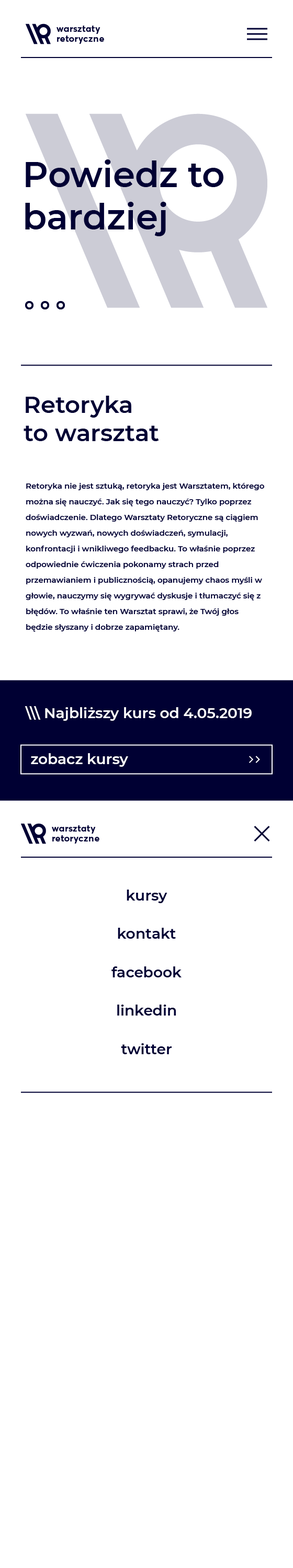
<style>
.page{position:relative;width:293px;height:1568px;background:#ffffff}
.page>*{position:absolute;margin:0}
.t1{font:9.4px/10.2px "Averta-Bold";letter-spacing:0.015em;color:#000033}
.t2{font:35.3px/42.3px "Montserrat-SemiBold";color:#000033}
.t3{font:23.5px/28.2px "Montserrat-SemiBold";color:#000033}
.t4{font:7.8px/15.7px "Montserrat-SemiBold";color:#000033}
.t5{font:14.6px "Montserrat-SemiBold";color:#ffffff}
.t6{font:14.6px "Montserrat-SemiBold";color:#000033}
</style>
<div class="page">
<p class="t1" style="left:56px;top:25px;width:48px;height:19px">warsztaty<br>retoryczne</p>
<p class="t2" style="left:25px;top:159px;width:198px;height:77px">Powiedz to<br>bardziej</p>
<p class="t3" style="left:24px;top:396px;width:135px;height:45px">Retoryka<br>to warsztat</p>
<p class="t4" style="left:26px;top:483px;width:238px;height:149px">Retoryka nie jest sztuką, retoryka jest Warsztatem, którego można się nauczyć. Jak się tego nauczyć? Tylko poprzez doświadczenie. Dlatego Warsztaty Retoryczne są ciągiem nowych wyzwań, nowych doświadczeń, symulacji, konfrontacji i wnikliwego feedbacku. To właśnie poprzez odpowiednie ćwiczenia pokonamy strach przed przemawianiem i publicznością, opanujemy chaos myśli w głowie, nauczymy się wygrywać dyskusje i tłumaczyć się z błędów. To właśnie ten Warsztat sprawi, że Twój głos będzie słyszany i dobrze zapamiętany.</p>
<p class="t5" style="left:25px;top:706px;width:226px;height:15px">\\\ Najbliższy kurs od 4.05.2019</p>
<p class="t5" style="left:31px;top:753px;width:97px;height:14px">zobacz kursy</p>
<p class="t1" style="left:52px;top:825px;width:47px;height:19px">warsztaty<br>retoryczne</p>
<p class="t6" style="left:126px;top:890px;width:41px;height:13px">kursy</p>
<p class="t6" style="left:118px;top:928px;width:58px;height:11px">kontakt</p>
<p class="t6" style="left:111px;top:966px;width:70px;height:11px">facebook</p>
<p class="t6" style="left:117px;top:1005px;width:59px;height:11px">linkedin</p>
<p class="t6" style="left:121px;top:1043px;width:50px;height:11px">twitter</p>
</div>
